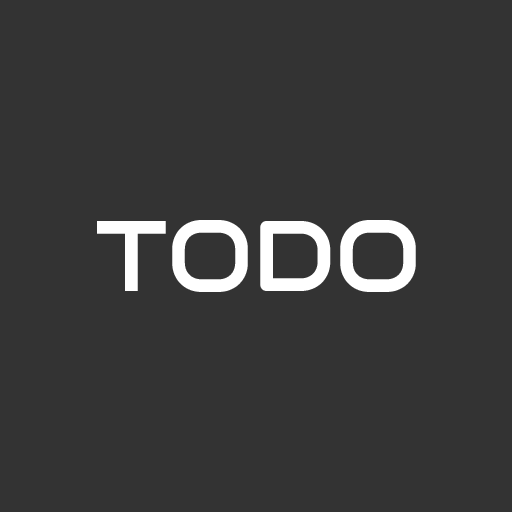
<style>
.page{position:relative;width:512px;height:512px;background:#333333}
.page>*{position:absolute;margin:0}
.t1{font:100px "Audiowide-Regular";color:#ffffff}
</style>
<div class="page">
<p class="t1" style="left:97px;top:220px;width:319px;height:72px">TODO</p>
</div>
